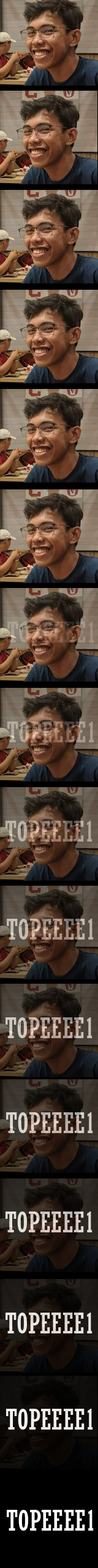
<style>
.page{position:relative;width:98px;height:1568px}
.page>*{position:absolute;margin:0}
.t1{font:27.6px "Rockwell-Condensed";letter-spacing:0.01em}
.t2{font:27.6px "Rockwell-Condensed";letter-spacing:0.01em;color:#ddd0c8}
.t3{font:27.6px "Rockwell-Condensed";letter-spacing:0.01em;color:#e8e1db}
.t4{font:27.6px "Rockwell-Condensed";letter-spacing:0.01em;color:#ffffff}
</style>
<div class="page">
<p class="t1" style="left:7px;top:722px;width:87px;height:20px">TOPEEEE1</p>
<p class="t1" style="left:6px;top:821px;width:86px;height:21px">TOPEEEE1</p>
<p class="t1" style="left:7px;top:919px;width:87px;height:21px">TOPEEEE1</p>
<p class="t1" style="left:6px;top:1017px;width:86px;height:21px">TOPEEEE1</p>
<p class="t1" style="left:6px;top:1112px;width:87px;height:21px">TOPEEEE1</p>
<p class="t2" style="left:6px;top:1212px;width:86px;height:20px">TOPEEEE1</p>
<p class="t3" style="left:6px;top:1313px;width:86px;height:20px">TOPEEEE1</p>
<p class="t4" style="left:6px;top:1409px;width:87px;height:21px">TOPEEEE1</p>
<p class="t4" style="left:7px;top:1510px;width:87px;height:21px">TOPEEEE1</p>
</div>
